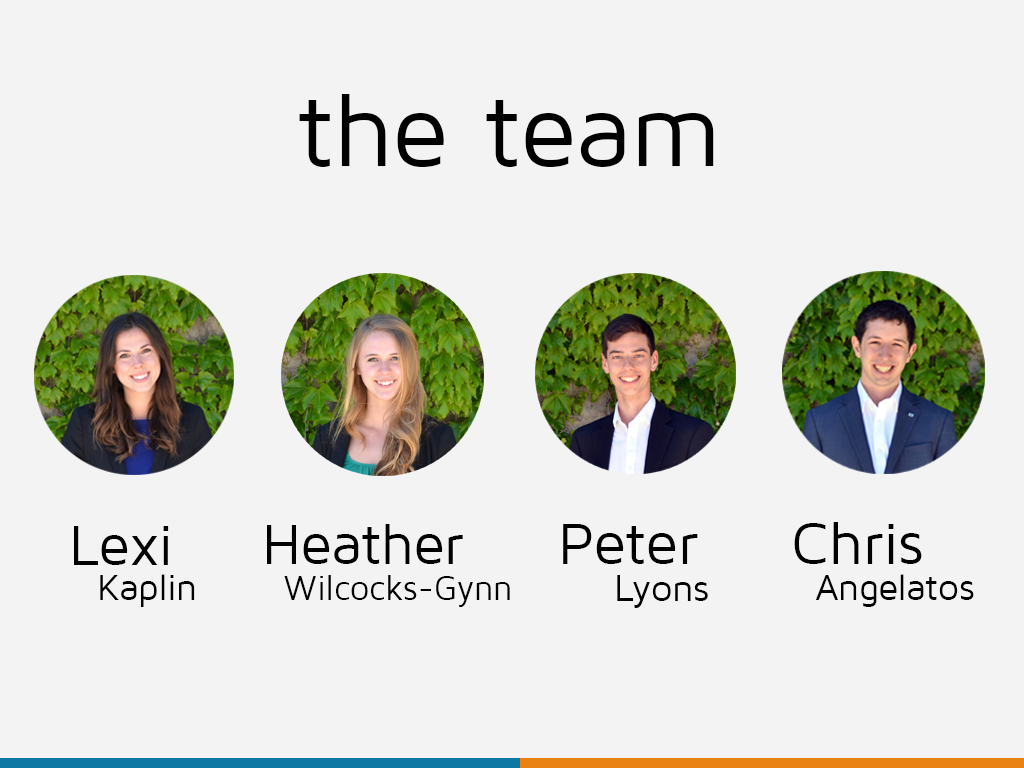
<style>
.page{position:relative;width:1024px;height:768px;background:#f3f3f3}
.page>*{position:absolute;margin:0}
.t1{font:104.6px "MavenProRegular";color:#000000}
.t2{font:57.9px "MavenProRegular";color:#000000}
.t3{font:57.8px "MavenProRegular";color:#000000}
.t4{font:60px "MavenProRegular";color:#000000}
.t5{font:59.7px "MavenProRegular";color:#000000}
.t6{font:36.9px "MavenProRegular";color:#000000}
.t7{font:36.1px "MavenProRegular";color:#000000;scale:0.95 1}
.t8{font:38.1px "MavenProRegular";color:#000000}
.t9{font:36.6px "MavenProRegular";color:#000000}
</style>
<div class="page">
<p class="t1" style="left:299px;top:94px;width:415px;height:73px">the team</p>
<p class="t2" style="left:74px;top:526px;width:95px;height:39px">Lexi</p>
<p class="t3" style="left:267px;top:524px;width:196px;height:40px">Heather</p>
<p class="t4" style="left:563px;top:524px;width:135px;height:40px">Peter</p>
<p class="t5" style="left:794px;top:522px;width:128px;height:42px">Chris</p>
<p class="t6" style="left:100px;top:574px;width:95px;height:33px">Kaplin</p>
<p class="t7" style="left:284px;top:575px;width:226px;height:32px">Wilcocks-Gynn</p>
<p class="t8" style="left:617px;top:575px;width:91px;height:33px">Lyons</p>
<p class="t9" style="left:815px;top:574px;width:159px;height:33px">Angelatos</p>
</div>
